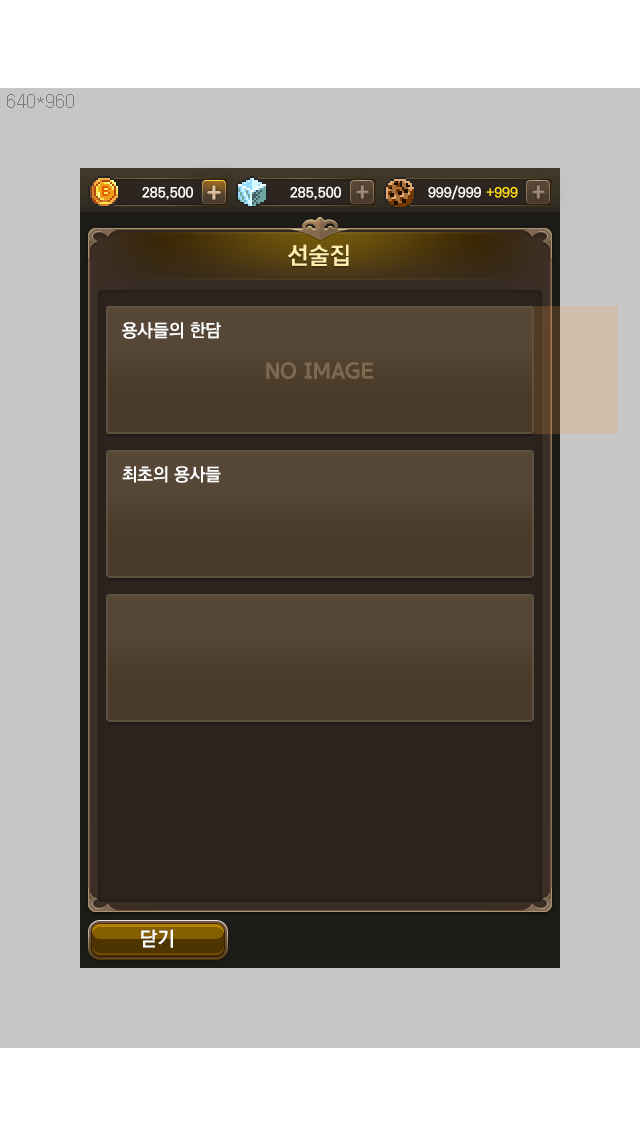
<style>
.page{position:relative;width:640px;height:1136px;background:#c6c6c6}
.page>*{position:absolute;margin:0}
.t1{font:24px "KoPubDotumBold";color:#ffedab}
.t2{font:18px "KoPubDotumBold";color:#ffffff}
.t3{font:22px "GodoB";color:#7a6957}
.t4{font:20px "KoPubDotumBold";color:#ffffff}
</style>
<div class="page">
<p class="t1" style="left:287px;top:244px;width:62px;height:22px">선술집</p>
<p class="t2" style="left:122px;top:322px;width:99px;height:17px">용사들의 한담</p>
<p class="t3" style="left:266px;top:362px;width:108px;height:17px">NO IMAGE</p>
<p class="t2" style="left:122px;top:466px;width:99px;height:17px">최초의 용사들</p>
<p class="t4" style="left:141px;top:929px;width:32px;height:19px">닫기</p>
</div>
